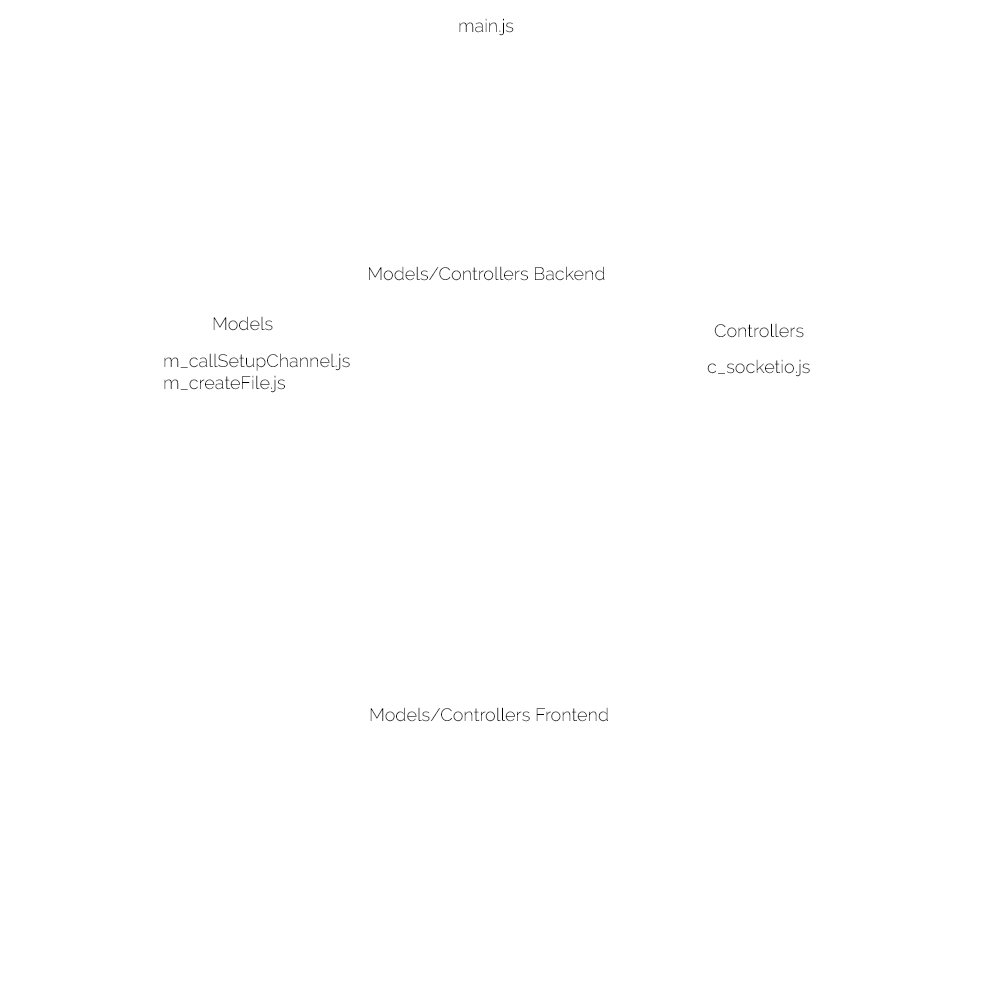
<style>
.page{position:relative;width:1000px;height:1000px;background:#ffffff}
.page>*{position:absolute;margin:0}
.t1{font:18px "Raleway-Light";color:#000000}
</style>
<div class="page">
<p class="t1" style="left:459px;top:18px;width:55px;height:18px">main.js</p>
<p class="t1" style="left:369px;top:266px;width:236px;height:15px">Models/Controllers Backend</p>
<p class="t1" style="left:213px;top:316px;width:60px;height:15px">Models</p>
<p class="t1" style="left:714px;top:323px;width:90px;height:15px">Controllers</p>
<p class="t1" style="left:164px;top:353px;width:186px;height:40px">m_callSetupChannel.js<br>m_createFile.js</p>
<p class="t1" style="left:707px;top:359px;width:103px;height:18px">c_socketio.js</p>
<p class="t1" style="left:370px;top:707px;width:238px;height:15px">Models/Controllers Frontend</p>
</div>
